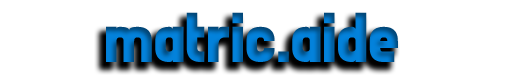
<style>
.page{position:relative;width:509px;height:82px;background:#ffffff}
.page>*{position:absolute;margin:0}
.t1{font:72px "FrontPageNews1.1"}
</style>
<div class="page">
<p class="t1" style="left:106px;top:12px;width:292px;height:50px">matric.aide</p>
</div>
